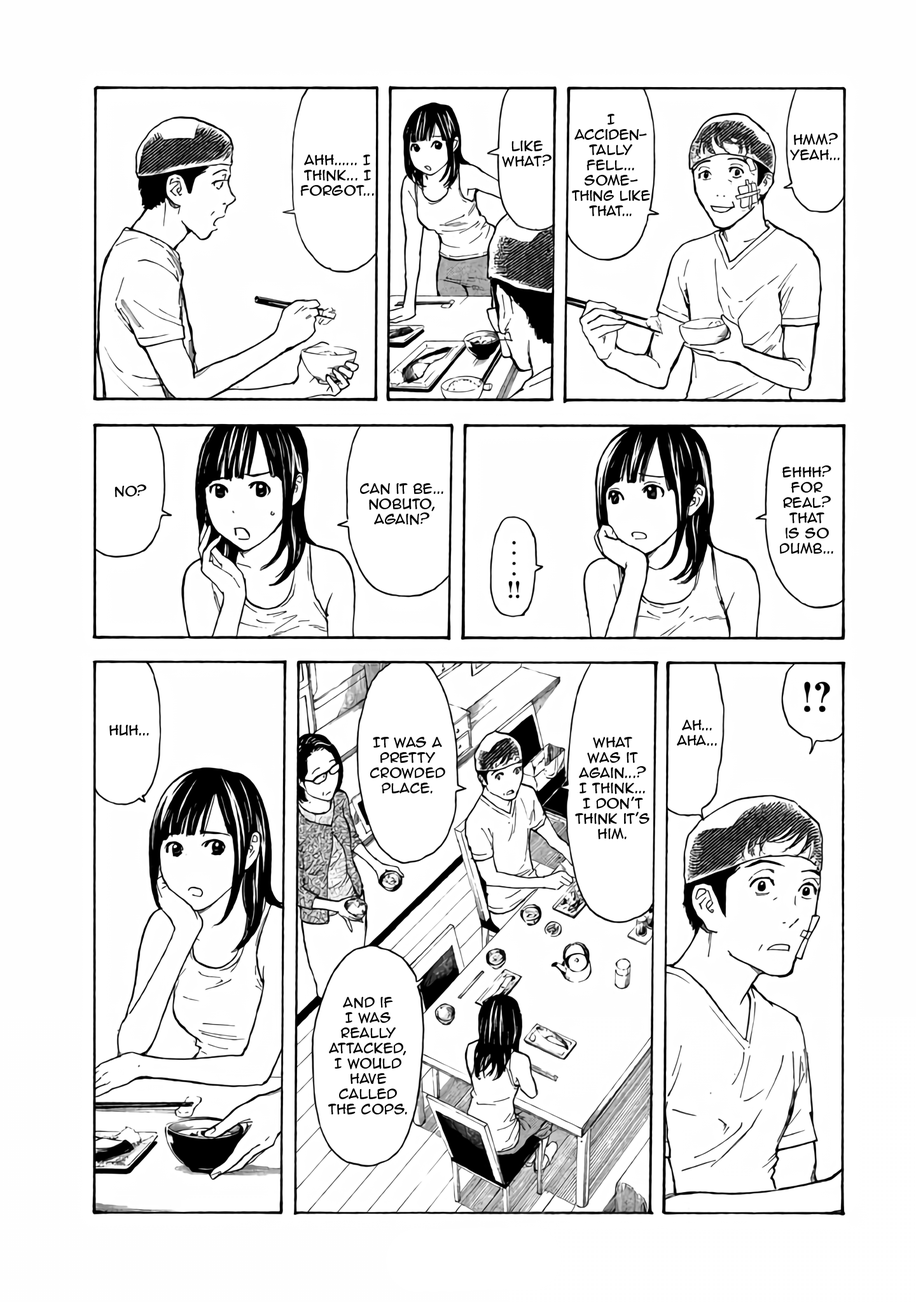
<style>
.page{position:relative;width:916px;height:1302px;background:#ffffff}
.page>*{position:absolute;margin:0}
.t1{font:12.7px "AnimeAce2.0BB";color:#000000}
</style>
<div class="page">
<p class="t1" style="left:572px;top:114px;width:78px;height:102px;text-align:center">I acciden-<br>tally fell... some-<br>thing like that...</p>
<p class="t1" style="left:790px;top:133px;width:49px;height:27px;text-align:center">Hmm? Yeah...</p>
<p class="t1" style="left:502px;top:141px;width:49px;height:26px;text-align:center">Like what?</p>
<p class="t1" style="left:300px;top:155px;width:74px;height:41px;text-align:center">Ahh...... I think... I forgot...</p>
<p class="t1" style="left:779px;top:465px;width:54px;height:89px;text-align:center">Ehhh? for real? That is so dumb...</p>
<p class="t1" style="left:114px;top:485px;width:32px;height:12px">No?</p>
<p class="t1" style="left:360px;top:483px;width:83px;height:42px;text-align:center">Can it be... Nobuto, again?</p>
<p class="t1" style="left:109px;top:725px;width:40px;height:11px">Huh...</p>
<p class="t1" style="left:677px;top:720px;width:40px;height:26px;text-align:center">Ah...<br>Aha...</p>
<p class="t1" style="left:369px;top:737px;width:76px;height:57px;text-align:center">It was a pretty crowded place.</p>
<p class="t1" style="left:575px;top:737px;width:74px;height:102px;text-align:center">What <br>was it again...? I think... I don’t think it’s him.</p>
<p class="t1" style="left:328px;top:997px;width:79px;height:118px;text-align:center">and if I was really attacked, I would have called the cops.</p>
</div>
